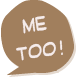
<style>
.page{position:relative;width:76px;height:78px;background:#a17f5d}
.page>*{position:absolute;margin:0}
.t1{font:22.2px "SuplexmentaryComicNC";color:#f5ebe9;scale:0.79 1}
</style>
<div class="page">
<p class="t1" style="left:16px;top:15px;width:47px;height:46px;text-align:center;rotate:-8deg">ME <br>TOO !</p>
</div>
